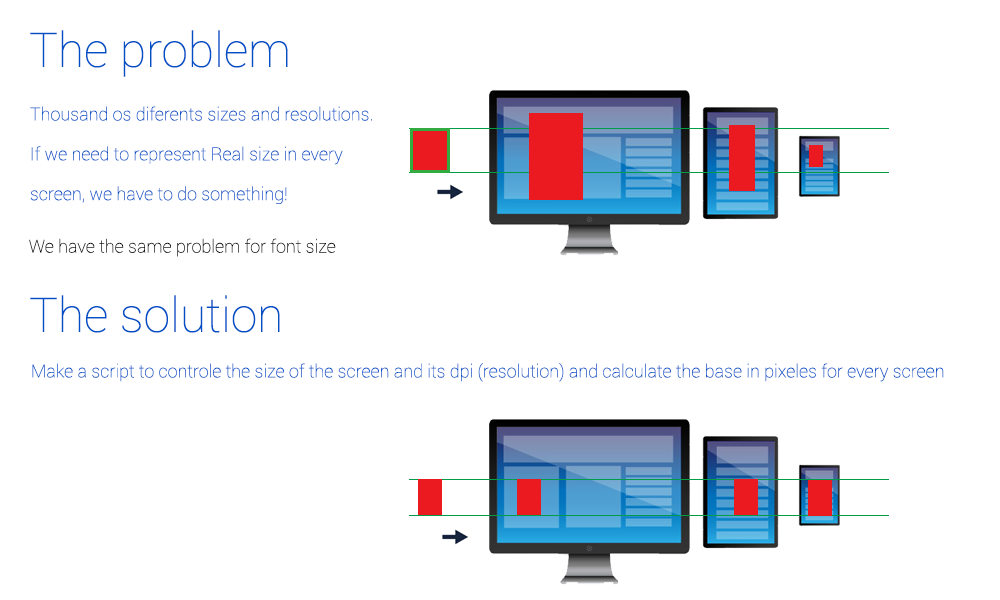
<style>
.page{position:relative;width:1000px;height:600px;background:#ffffff}
.page>*{position:absolute;margin:0}
.t1{font:48px "Roboto-Thin";color:#004fc5}
.t2{font:18px/39.9px "Roboto-Thin";color:#004fc5}
.t3{font:18px "Roboto-Thin";color:#000000}
.t4{font:18px "Roboto-Thin";color:#004fc5}
</style>
<div class="page">
<p class="t1" style="left:30px;top:30px;width:258px;height:47px">The problem</p>
<p class="t2" style="left:30px;top:106px;width:342px;height:98px">Thousand os diferents sizes and resolutions.<br>If we need to represent Real size in every<br>screen, we have to do something!</p>
<p class="t3" style="left:29px;top:238px;width:307px;height:19px">We have the same problem for font size</p>
<p class="t1" style="left:30px;top:295px;width:250px;height:38px">The solution</p>
<p class="t4" style="left:32px;top:363px;width:912px;height:19px">Make a script to controle the size of the screen and its dpi (resolution) and calculate the base in pixeles for every screen</p>
</div>
